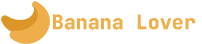
<style>
.page{position:relative;width:202px;height:44px;background:#ffffff}
.page>*{position:absolute;margin:0}
.t1{font:20px "JetBrainsMono-ExtraBold";color:#eeaf4b}
</style>
<div class="page">
<p class="t1" style="left:53px;top:14px;width:143px;height:16px">Banana Lover</p>
</div>
